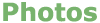
<style>
.page{position:relative;width:100px;height:23px;background:#ffffff}
.page>*{position:absolute;margin:0}
.t1{font:25px "Verdana-Bold";color:#78b36d}
</style>
<div class="page">
<p class="t1" style="left:3px;top:2px;width:94px;height:20px">Photos</p>
</div>
